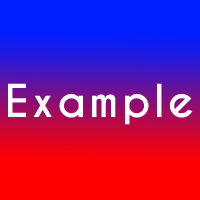
<style>
.page{position:relative;width:200px;height:200px}
.page>*{position:absolute;margin:0}
.t1{font:42.5px "CaviarDreams-Bold";letter-spacing:0.08em;color:#ffffff}
</style>
<div class="page">
<p class="t1" style="left:8px;top:83px;width:185px;height:42px">Example</p>
</div>
